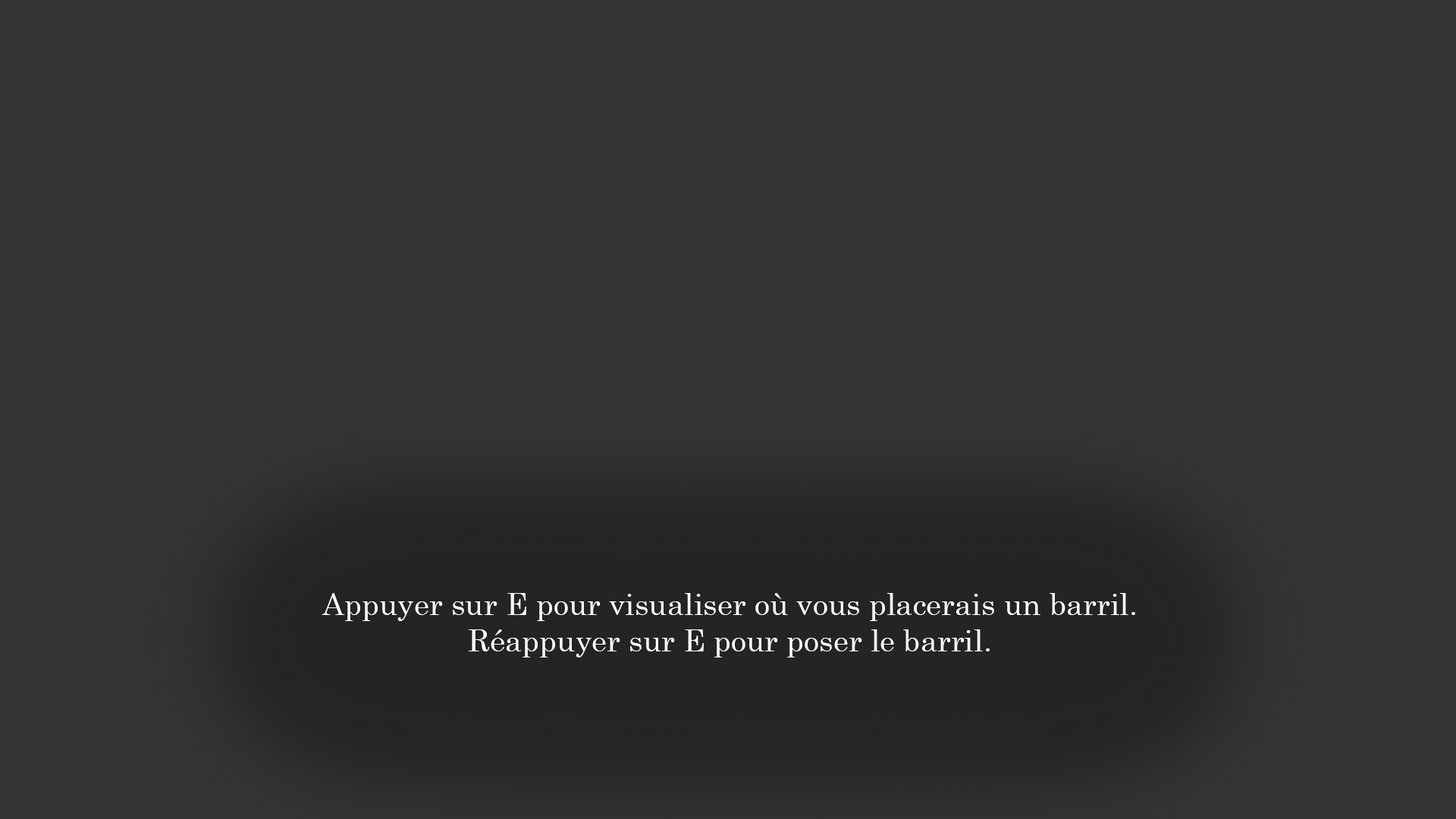
<style>
.page{position:relative;width:1456px;height:819px;background:#333333}
.page>*{position:absolute;margin:0}
.t1{font:30.3px "Century";color:#ffffff}
</style>
<div class="page">
<p class="t1" style="left:322px;top:593px;width:813px;height:64px;text-align:center">Appuyer sur E pour visualiser où vous placerais un barril.<br>Réappuyer sur E pour poser le barril.</p>
</div>
